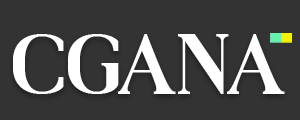
<style>
.page{position:relative;width:300px;height:120px;background:#333333}
.page>*{position:absolute;margin:0}
.t1{font:81.9px "MOODERN";color:#ffffff}
</style>
<div class="page">
<p class="t1" style="left:13px;top:34px;width:272px;height:60px">CGANA</p>
</div>
